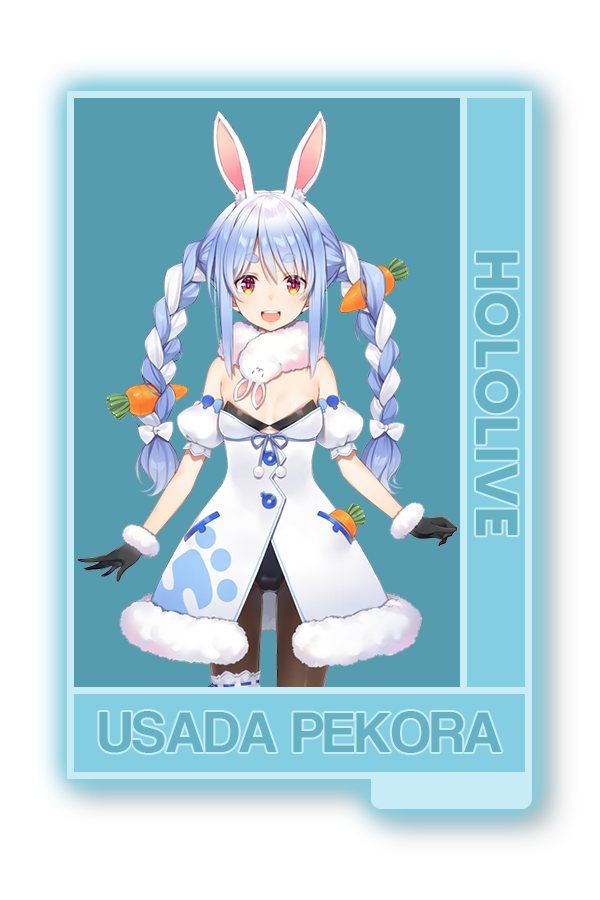
<style>
.page{position:relative;width:600px;height:900px;background:#ffffff}
.page>*{position:absolute;margin:0}
.t1{font:59.2px "MADETOMMY-Bold";color:#66b2c5}
.t2{font:59.1px "CoolveticaRg-Regular";color:#66b2c5}
</style>
<div class="page">
<p class="t1" style="left:475px;top:252px;width:44px;height:284px;rotate:90deg">HOLOLIVE</p>
<p class="t2" style="left:99px;top:711px;width:403px;height:42px">USADA PEKORA</p>
</div>
